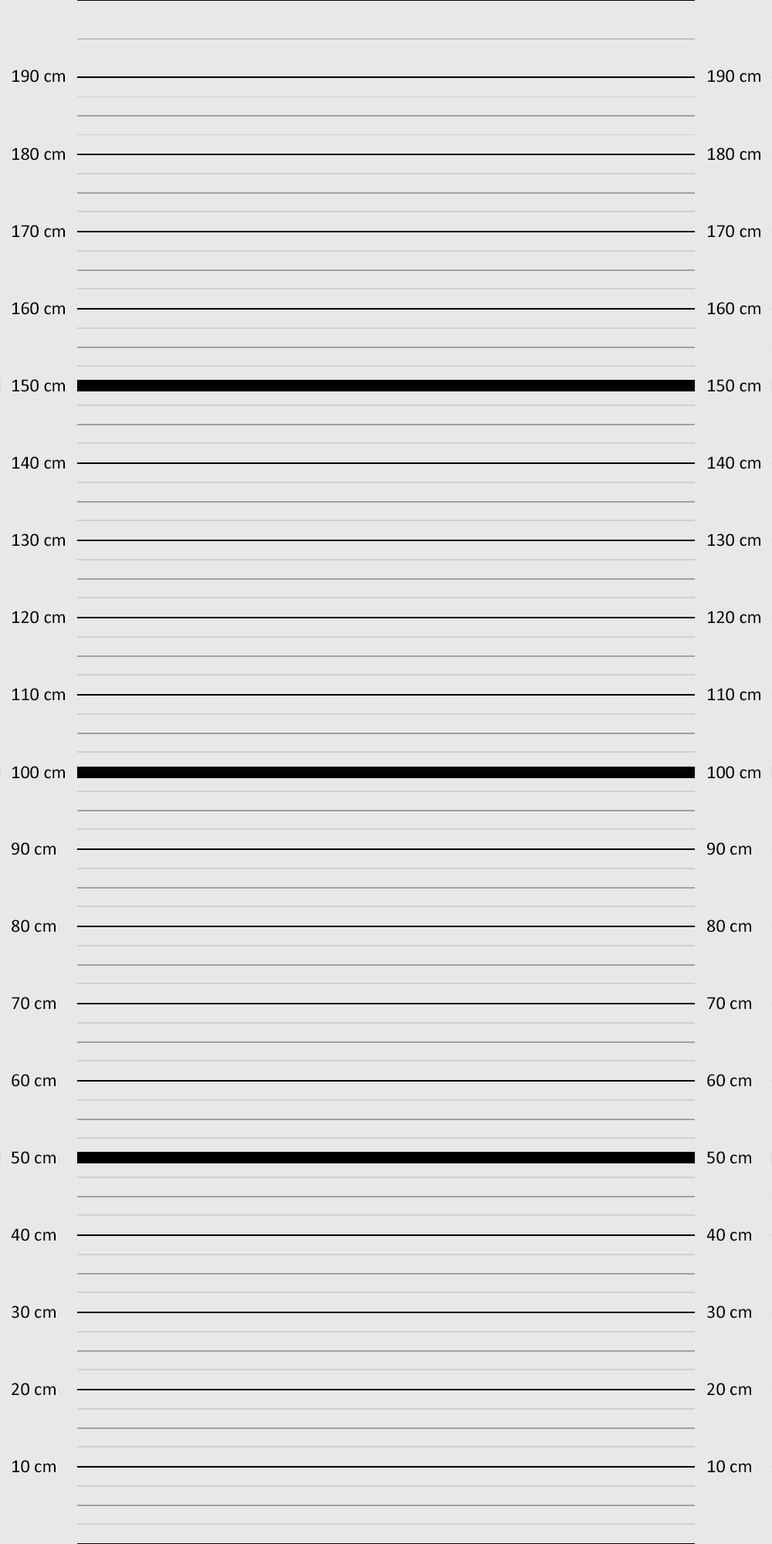
<style>
.page{position:relative;width:772px;height:1544px;background:#e9e7e7}
.page>*{position:absolute;margin:0}
.t1{font:18.7px "Calibri";color:#000000}
</style>
<div class="page">
<p class="t1" style="left:12px;top:69px;width:53px;height:14px">190 cm</p>
<p class="t1" style="left:708px;top:69px;width:53px;height:14px">190 cm</p>
<p class="t1" style="left:12px;top:147px;width:53px;height:14px">180 cm</p>
<p class="t1" style="left:708px;top:147px;width:53px;height:14px">180 cm</p>
<p class="t1" style="left:12px;top:225px;width:53px;height:13px">170 cm</p>
<p class="t1" style="left:708px;top:225px;width:53px;height:13px">170 cm</p>
<p class="t1" style="left:12px;top:302px;width:53px;height:13px">160 cm</p>
<p class="t1" style="left:708px;top:302px;width:53px;height:13px">160 cm</p>
<p class="t1" style="left:12px;top:379px;width:53px;height:13px">150 cm</p>
<p class="t1" style="left:708px;top:379px;width:53px;height:13px">150 cm</p>
<p class="t1" style="left:12px;top:456px;width:53px;height:13px">140 cm</p>
<p class="t1" style="left:708px;top:456px;width:53px;height:13px">140 cm</p>
<p class="t1" style="left:12px;top:534px;width:53px;height:13px">130 cm</p>
<p class="t1" style="left:708px;top:534px;width:53px;height:13px">130 cm</p>
<p class="t1" style="left:12px;top:611px;width:53px;height:13px">120 cm</p>
<p class="t1" style="left:708px;top:611px;width:53px;height:13px">120 cm</p>
<p class="t1" style="left:12px;top:688px;width:53px;height:13px">110 cm</p>
<p class="t1" style="left:708px;top:688px;width:53px;height:13px">110 cm</p>
<p class="t1" style="left:12px;top:766px;width:53px;height:13px">100 cm</p>
<p class="t1" style="left:708px;top:766px;width:53px;height:13px">100 cm</p>
<p class="t1" style="left:12px;top:842px;width:44px;height:14px">90 cm</p>
<p class="t1" style="left:707px;top:842px;width:44px;height:14px">90 cm</p>
<p class="t1" style="left:12px;top:920px;width:44px;height:13px">80 cm</p>
<p class="t1" style="left:707px;top:920px;width:44px;height:13px">80 cm</p>
<p class="t1" style="left:12px;top:997px;width:44px;height:13px">70 cm</p>
<p class="t1" style="left:707px;top:997px;width:44px;height:13px">70 cm</p>
<p class="t1" style="left:12px;top:1074px;width:44px;height:13px">60 cm</p>
<p class="t1" style="left:707px;top:1074px;width:44px;height:13px">60 cm</p>
<p class="t1" style="left:12px;top:1151px;width:44px;height:13px">50 cm</p>
<p class="t1" style="left:707px;top:1151px;width:44px;height:13px">50 cm</p>
<p class="t1" style="left:11px;top:1228px;width:45px;height:14px">40 cm</p>
<p class="t1" style="left:707px;top:1228px;width:44px;height:14px">40 cm</p>
<p class="t1" style="left:12px;top:1306px;width:44px;height:13px">30 cm</p>
<p class="t1" style="left:707px;top:1306px;width:44px;height:13px">30 cm</p>
<p class="t1" style="left:12px;top:1383px;width:44px;height:13px">20 cm</p>
<p class="t1" style="left:707px;top:1383px;width:44px;height:13px">20 cm</p>
<p class="t1" style="left:12px;top:1460px;width:44px;height:13px">10 cm</p>
<p class="t1" style="left:708px;top:1460px;width:43px;height:13px">10 cm</p>
</div>
